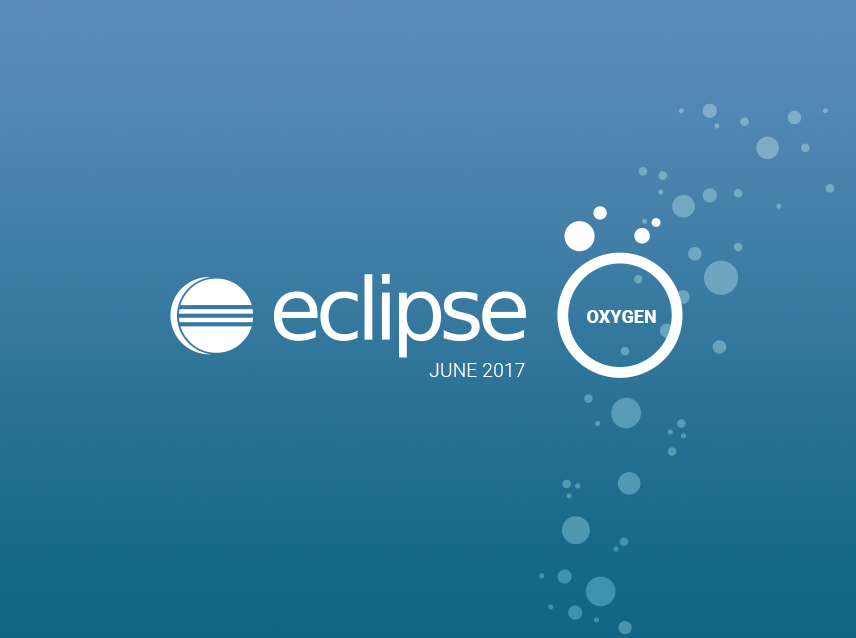
<style>
.page{position:relative;width:856px;height:638px}
.page>*{position:absolute;margin:0}
.t1{font:17.5px "Roboto-Black";letter-spacing:0.02em;color:#ffffff}
.t2{font:18.8px "Roboto-Light";letter-spacing:0.02em;color:#ffffff}
</style>
<div class="page">
<p class="t1" style="left:587px;top:310px;width:69px;height:13px">OXYGEN</p>
<p class="t2" style="left:429px;top:363px;width:96px;height:14px">JUNE 2017</p>
</div>
